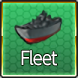
<style>
.page{position:relative;width:78px;height:78px}
.page>*{position:absolute;margin:0}
.t1{font:18px "UDShinGoPro-Regular";letter-spacing:-0.04em;color:#ffffff;scale:0.9 1}
</style>
<div class="page">
<p class="t1" style="left:21px;top:50px;width:36px;height:16px">Fleet</p>
</div>
